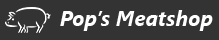
<style>
.page{position:relative;width:219px;height:40px;background:#333333}
.page>*{position:absolute;margin:0}
.t1{font:21.3px "SegoeUI-BoldItalic";color:#ffffff}
</style>
<div class="page">
<p class="t1" style="left:60px;top:10px;width:153px;height:21px">Pop’s Meatshop</p>
</div>
